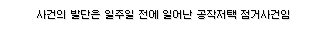
<style>
.page{position:relative;width:320px;height:30px;background:#ffffff}
.page>*{position:absolute;margin:0}
.t1{font:10px "Galmuri9-Regular";color:#000000}
</style>
<div class="page">
<p class="t1" style="left:37px;top:10px;width:252px;height:9px">사건의 발단은 일주일 전에 일어난 공작저택 점거사건임</p>
</div>
